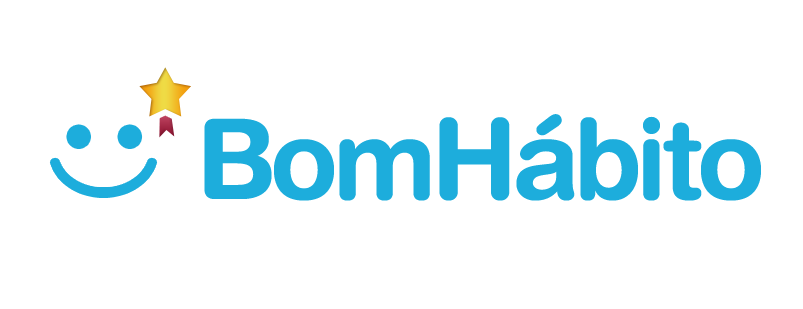
<style>
.page{position:relative;width:803px;height:309px;background:#ffffff}
.page>*{position:absolute;margin:0}
.t1{font:111.3px "HelveticaRoundedLTStd-Bd";letter-spacing:-0.05em;color:#1daddc}
</style>
<div class="page">
<p class="t1" style="left:204px;top:114px;width:557px;height:87px">BomHábito</p>
</div>
